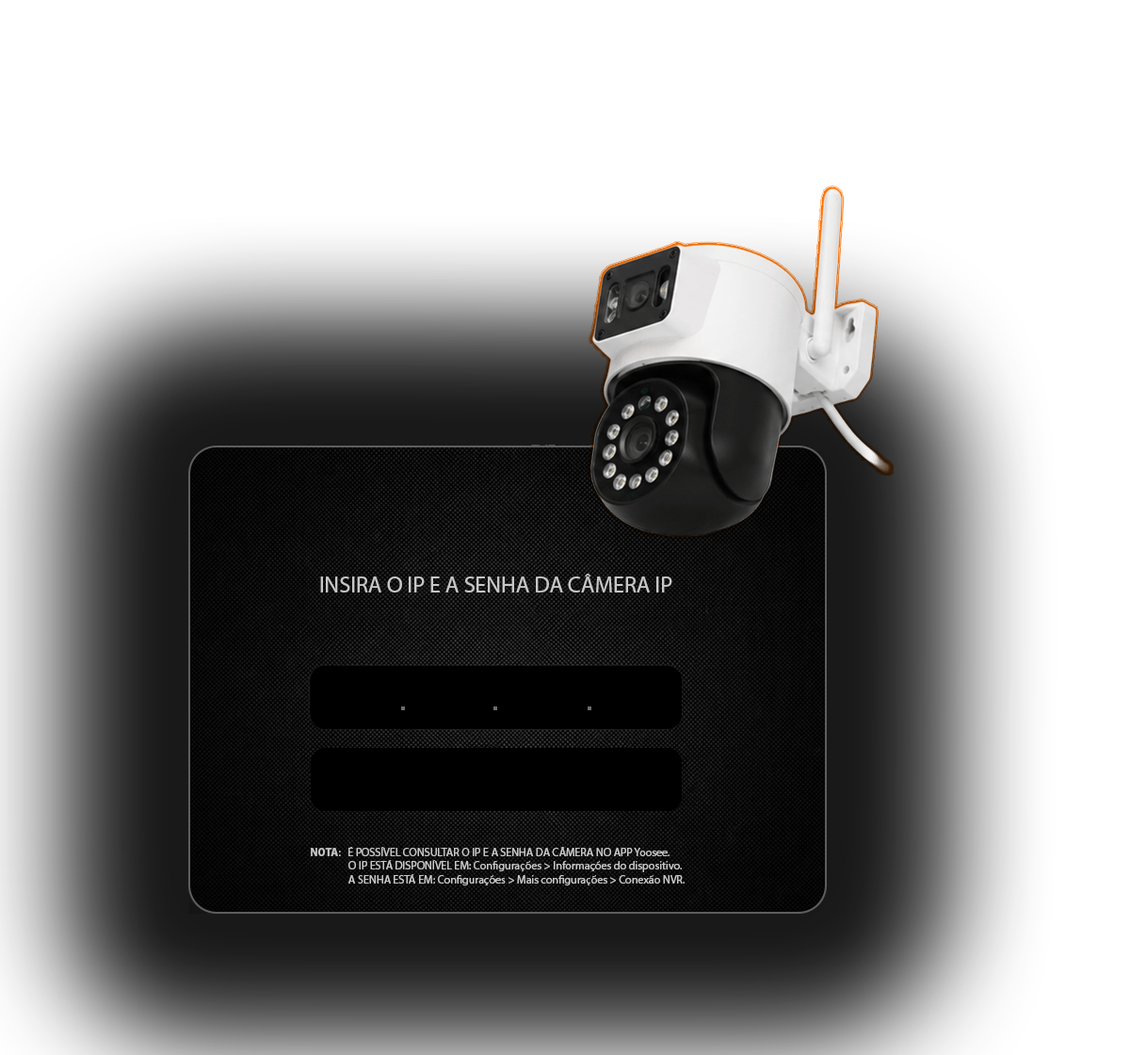
<style>
.page{position:relative;width:1130px;height:1055px;background:#ffffff}
.page>*{position:absolute;margin:0}
.t1{font:22.6px "MyriadPro-Regular";color:#c7c7c7}
.t2{font:11.3px "MyriadPro-Regular";color:#c7c7c7}
.t3{font:11.3px "MyriadPro-Bold";color:#c7c7c7}
</style>
<div class="page">
<p class="t1" style="left:320px;top:574px;width:353px;height:18px">INSIRA O IP E A SENHA DA CÂMERA IP</p>
<p class="t2" style="left:311px;top:847px;width:374px;height:38px"><span class="t3">NOTA</span>:   É POSSÍVEL CONSULTAR O IP E A SENHA DA CÂMERA NO APP Yoosee.<br>   O IP ESTÁ DISPONÍVEL EM: Configurações &gt; Informações do dispositivo.<br>   A SENHA ESTÁ EM: Configurações &gt; Mais configurações &gt; Conexão NVR.</p>
</div>
